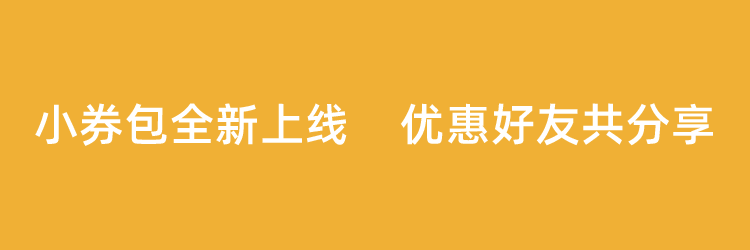
<style>
.page{position:relative;width:750px;height:250px;background:#f0b035}
.page>*{position:absolute;margin:0}
.t1{font:45px "AlibabaPuHuiTiM";letter-spacing:0.02em;color:#ffffff}
</style>
<div class="page">
<p class="t1" style="left:35px;top:103px;width:678px;height:43px">小券包全新上线    优惠好友共分享</p>
</div>
